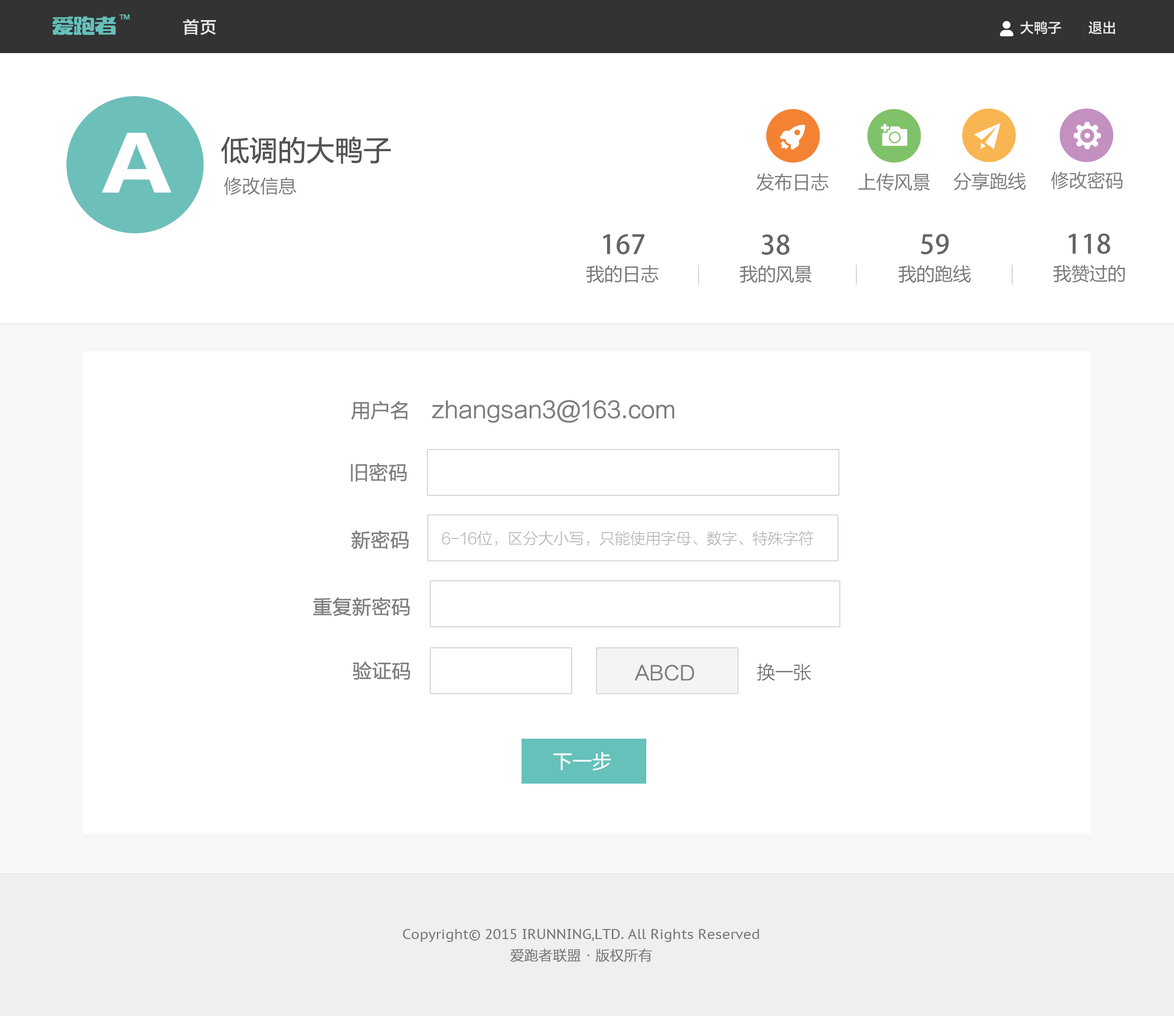
<style>
.page{position:relative;width:1174px;height:1016px;background:#ffffff}
.page>*{position:absolute;margin:0}
.t1{font:26.7px "MFWenYan_Noncommercial-Regular";letter-spacing:-0.04em;color:#67c7bf;scale:0.83 1}
.t2{font:6.3px "FZLTZHK--GBK1-0";letter-spacing:-0.049em;color:#67c7bf;font-weight:bold}
.t3{font:16.7px "FZLTZHK--GBK1-0";letter-spacing:0.024em;color:#ffffff}
.t4{font:13.9px "FZLTZHK--GBK1-0";color:#ffffff}
.t5{font:27.7px "MicrosoftYaHei";color:#535353;font-weight:bold}
.t6{font:18.2px "MicrosoftYaHei";color:#7f7f7f}
.t7{font:26.3px "AdobeHeitiStd-Regular";letter-spacing:0.018em;color:#656565}
.t8{font:18.2px "MicrosoftYaHei";color:#7a7a7a}
.t9{font:19.1px "FZLTXHK--GBK1-0";color:#7e7e7e;font-weight:bold}
.t10{font:22.2px "FZLTXHK--GBK1-0";color:#7e7e7e;font-weight:bold}
.t11{font:15.3px "FZLTXHK--GBK1-0";color:#b7b7b7}
.t12{font:18.2px "FZLTXHK--GBK1-0";color:#666666}
.t13{font:19.1px "FZLTXHK--GBK1-0";color:#ffffff;font-weight:bold}
.t14{font:13.9px/23.4px "PTSans-Caption";color:#757575}
.t15{font:13.9px/21px "FZLTXHK--GBK1-0";color:#757575;font-weight:bold}
</style>
<div class="page">
<p class="t1" style="left:53px;top:16px;width:63px;height:19px;opacity:0.95">爱跑者</p>
<p class="t2" style="left:119px;top:14px;width:11px;height:6px">TM</p>
<p class="t3" style="left:183px;top:19px;width:33px;height:16px;opacity:0.85">首页</p>
<p class="t4" style="left:1020px;top:21px;width:95px;height:13px;opacity:0.85">大鸭子       退出</p>
<p class="t5" style="left:221px;top:136px;width:170px;height:28px">低调的大鸭子</p>
<p class="t6" style="left:756px;top:173px;width:72px;height:18px">发布日志</p>
<p class="t6" style="left:858px;top:173px;width:72px;height:18px">上传风景</p>
<p class="t6" style="left:953px;top:172px;width:73px;height:18px">分享跑线</p>
<p class="t6" style="left:1051px;top:171px;width:72px;height:18px">修改密码</p>
<p class="t6" style="left:224px;top:177px;width:73px;height:18px">修改信息</p>
<p class="t7" style="left:603px;top:234px;width:41px;height:20px">167</p>
<p class="t7" style="left:921px;top:234px;width:28px;height:20px">59</p>
<p class="t7" style="left:1068px;top:233px;width:42px;height:21px">118</p>
<p class="t7" style="left:761px;top:234px;width:29px;height:21px">38</p>
<p class="t8" style="left:586px;top:265px;width:73px;height:18px">我的日志</p>
<p class="t8" style="left:739px;top:265px;width:73px;height:18px">我的风景</p>
<p class="t8" style="left:898px;top:265px;width:73px;height:18px">我的跑线</p>
<p class="t8" style="left:1053px;top:265px;width:72px;height:17px">我赞过的</p>
<p class="t9" style="left:351px;top:401px;width:57px;height:19px">用户名</p>
<p class="t10" style="left:432px;top:400px;width:242px;height:23px">zhangsan3@163.com</p>
<p class="t9" style="left:351px;top:463px;width:56px;height:19px">旧密码</p>
<p class="t9" style="left:351px;top:530px;width:58px;height:19px">新密码</p>
<p class="t11" style="left:442px;top:531px;width:372px;height:15px">6-16位，区分大小写，只能使用字母、数字、特殊字符</p>
<p class="t9" style="left:313px;top:597px;width:97px;height:19px">重复新密码</p>
<p class="t9" style="left:352px;top:661px;width:58px;height:19px">验证码</p>
<p class="t9" style="left:635px;top:664px;width:59px;height:17px">ABCD</p>
<p class="t12" style="left:757px;top:663px;width:54px;height:18px">换一张</p>
<p class="t13" style="left:553px;top:751px;width:58px;height:20px">下一步</p>
<p class="t14" style="left:403px;top:929px;width:356px;height:33px;text-align:center">Copyright© 2015 IRUNNING,LTD. All Rights Reserved<br><span class="t15">爱跑者联盟·版权所有</span></p>
</div>
